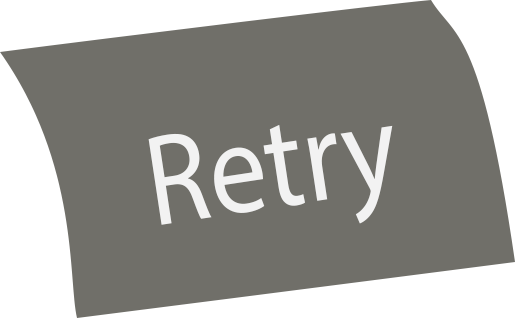
<style>
.page{position:relative;width:515px;height:318px;background:#706f69}
.page>*{position:absolute;margin:0}
.t1{font:129.8px "MyriadPro-Regular";color:#f2f2f2;scale:0.88 1}
</style>
<div class="page">
<p class="t1" style="left:148px;top:124px;width:245px;height:101px;rotate:-9deg">Retry</p>
</div>
